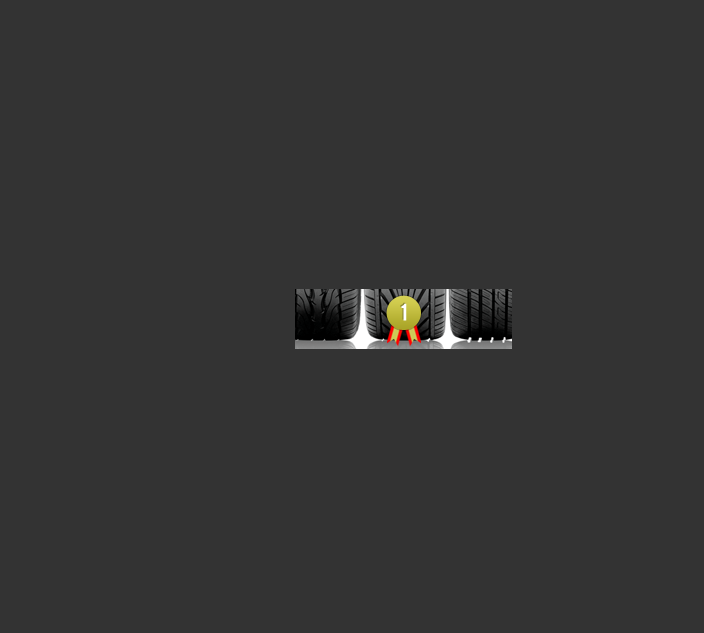
<style>
.page{position:relative;width:704px;height:633px;background:#333333}
.page>*{position:absolute;margin:0}
.t1{font:23.4px "BebasNeue";letter-spacing:0.04em;color:#ffffff}
</style>
<div class="page">
<p class="t1" style="left:401px;top:303px;width:6px;height:18px">1</p>
</div>
